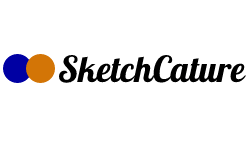
<style>
.page{position:relative;width:250px;height:150px;background:#ffffff}
.page>*{position:absolute;margin:0}
.t1{font:36px "Galada-Regular";color:#000000}
</style>
<div class="page">
<p class="t1" style="left:58px;top:55px;width:189px;height:28px">SketchCature</p>
</div>
